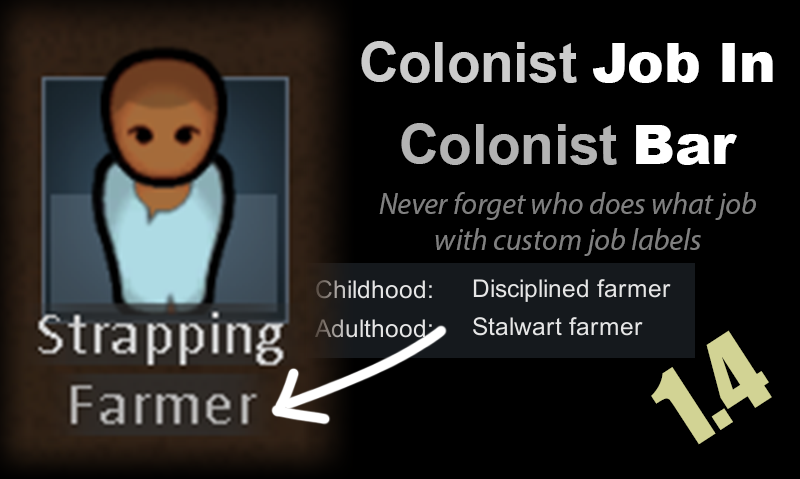
<style>
.page{position:relative;width:800px;height:479px;background:#000000}
.page>*{position:absolute;margin:0}
.t1{font:54.6px/81.9px "Arial-BoldMT";color:#cccccc}
.t2{font:54.6px/81.9px "Arial-Black";color:#ffffff}
.t3{font:54.6px/81.9px "Arial-BoldMT";color:#b3b3b3}
.t4{font:30px "MyriadPro-It";color:#808080}
.t5{font:100.3px "Impact";color:#d2d394}
</style>
<div class="page">
<p class="t1" style="left:361px;top:41px;width:412px;height:124px;text-align:center">Colonist <span class="t2">Job In </span><span class="t3">Colonist </span><span class="t2">Bar</span></p>
<p class="t4" style="left:379px;top:192px;width:377px;height:64px;text-align:center">Never forget who does what job with custom job labels<br><br><br>with custom labels</p>
<p class="t5" style="left:651px;top:330px;width:121px;height:115px;rotate:-33deg">1.4</p>
</div>
